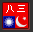
<style>
.page{position:relative;width:33px;height:32px;background:#f20000}
.page>*{position:absolute;margin:0}
.t1{font:10.4px "SimSun";color:#ffffff}
</style>
<div class="page">
<p class="t1" style="left:6px;top:5px;width:19px;height:8px">八三</p>
</div>
